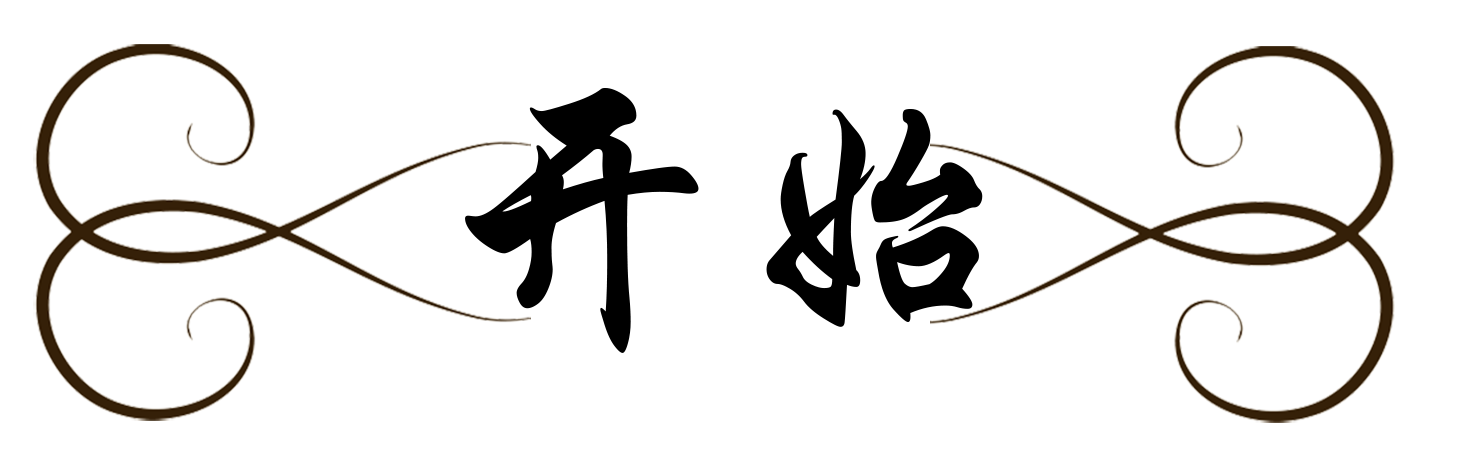
<style>
.page{position:relative;width:1467px;height:467px;background:#ffffff}
.page>*{position:absolute;margin:0}
.t1{font:300px "STXingkai";color:#000000}
</style>
<div class="page">
<p class="t1" style="left:465px;top:88px;width:518px;height:265px">开始</p>
</div>
